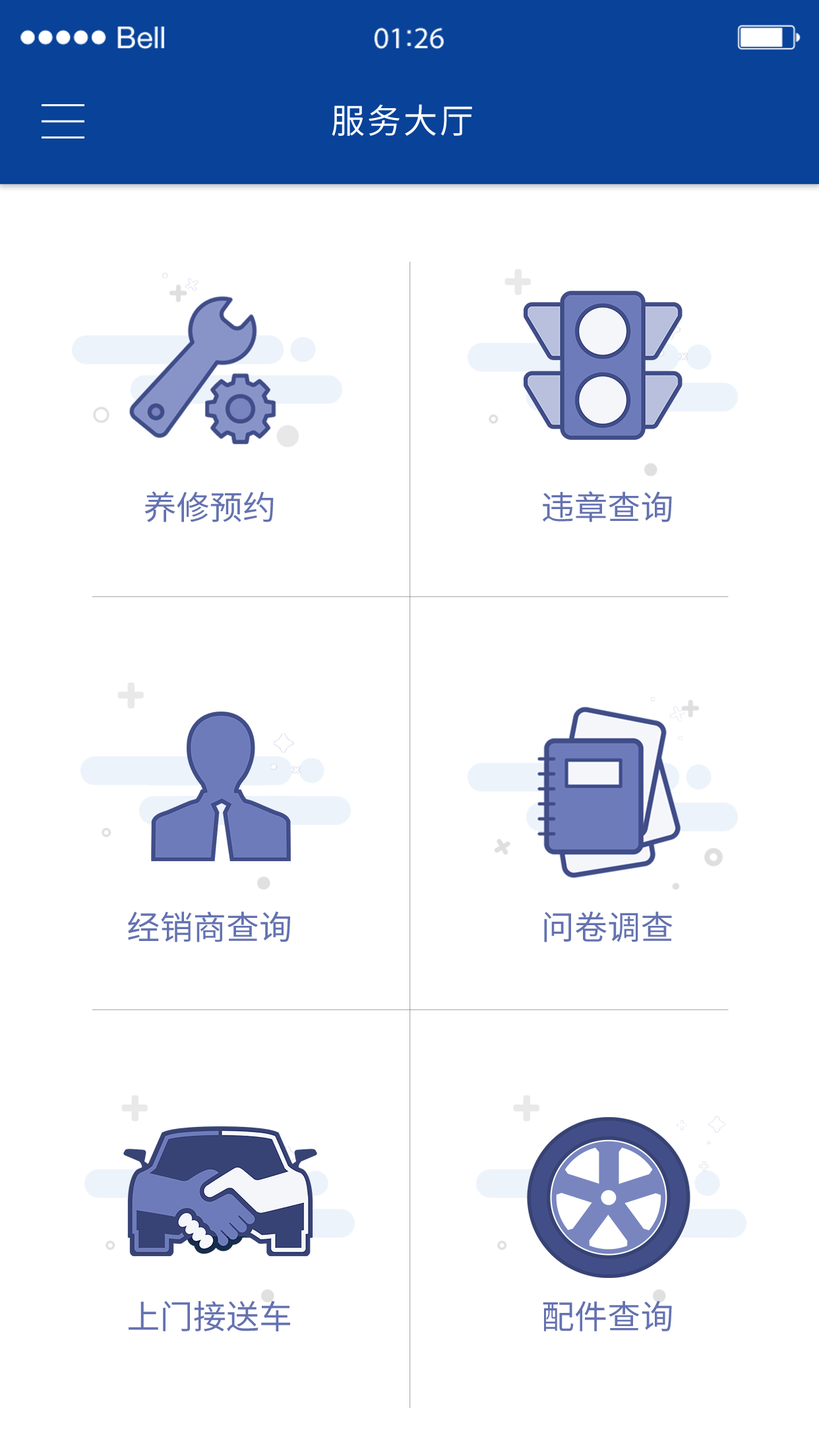
<style>
.page{position:relative;width:819px;height:1456px;background:#ffffff}
.page>*{position:absolute;margin:0}
.t1{font:34.2px "SourceHanSansCN-Regular";letter-spacing:0.06em;color:#ffffff}
.t2{font:33.1px "SourceHanSansCN-Regular";color:#6472b0}
</style>
<div class="page">
<p class="t1" style="left:332px;top:104px;width:140px;height:32px">服务大厅</p>
<p class="t2" style="left:144px;top:491px;width:130px;height:31px">养修预约</p>
<p class="t2" style="left:543px;top:491px;width:129px;height:31px">违章查询</p>
<p class="t2" style="left:128px;top:911px;width:162px;height:31px">经销商查询</p>
<p class="t2" style="left:544px;top:911px;width:129px;height:31px">问卷调查</p>
<p class="t2" style="left:129px;top:1300px;width:161px;height:31px">上门接送车</p>
<p class="t2" style="left:543px;top:1300px;width:129px;height:31px">配件查询</p>
</div>
